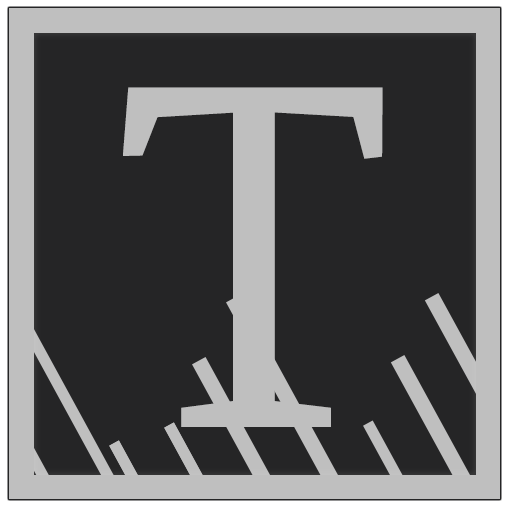
<style>
.page{position:relative;width:512px;height:512px;background:#252526}
.page>*{position:absolute;margin:0}
.t1{font:460px "Merriweather-MG";letter-spacing:0.5em;color:#bfbfbf}
</style>
<div class="page">
<p class="t1" style="left:123px;top:87px;width:260px;height:340px">T</p>
</div>
